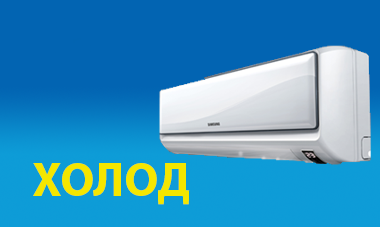
<style>
.page{position:relative;width:380px;height:227px;background:#0264b2}
.page>*{position:absolute;margin:0}
.t1{font:48px "MyriadPro-Bold";color:#f4e600}
</style>
<div class="page">
<p class="t1" style="left:33px;top:163px;width:157px;height:42px">ХОЛОД</p>
</div>
